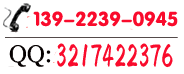
<style>
.page{position:relative;width:184px;height:74px;background:#ffffff}
.page>*{position:absolute;margin:0}
.t1{font:20px "FZY4JW--GB1-0";color:#f90b2c}
.t2{font:35.1px "HYi4gf";color:#f90b2c;scale:0.67 1}
</style>
<div class="page">
<p class="t1" style="left:33px;top:11px;width:145px;height:16px">139-2239-0945</p>
<p class="t2" style="left:57px;top:43px;width:116px;height:25px">3217422376</p>
</div>
